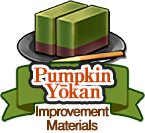
<style>
.page{position:relative;width:145px;height:133px;background:#ffffff}
.page>*{position:absolute;margin:0}
.t1{font:20px/16px "RyuminPro-ExBold";letter-spacing:-0.08em;color:#d04200;font-weight:bold}
.t2{font:14px/14px "FutoGoB101Pr5-Bold";letter-spacing:-0.08em;color:#703300;font-weight:bold}
</style>
<div class="page">
<p class="t1" style="left:34px;top:67px;width:78px;height:32px;text-align:center">Pumpkin<br>Yōkan</p>
<p class="t2" style="left:36px;top:105px;width:73px;height:26px;text-align:center">Improvement<br>Materials</p>
</div>
